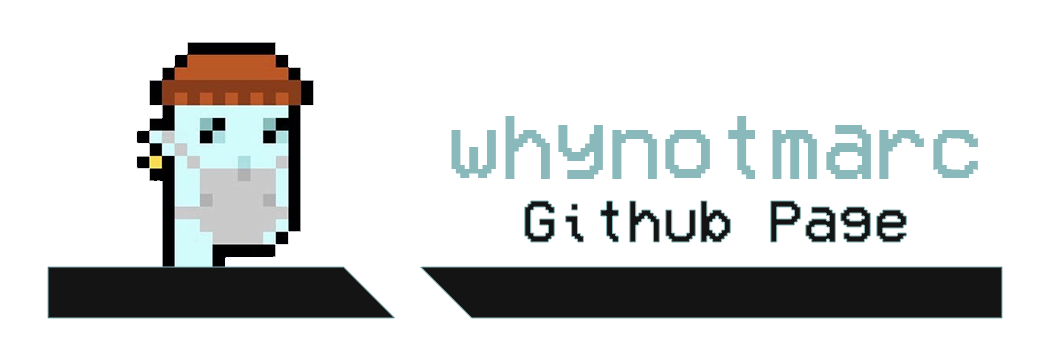
<style>
.page{position:relative;width:1050px;height:350px;background:#ffffff}
.page>*{position:absolute;margin:0}
.t1{font:91.3px "VCROSDMono";color:#89b9bb}
.t2{font:60px "VCROSDMono";color:#141414}
</style>
<div class="page">
<p class="t1" style="left:451px;top:116px;width:527px;height:63px">whynotmarc</p>
<p class="t2" style="left:524px;top:201px;width:383px;height:41px">Github Page</p>
</div>
